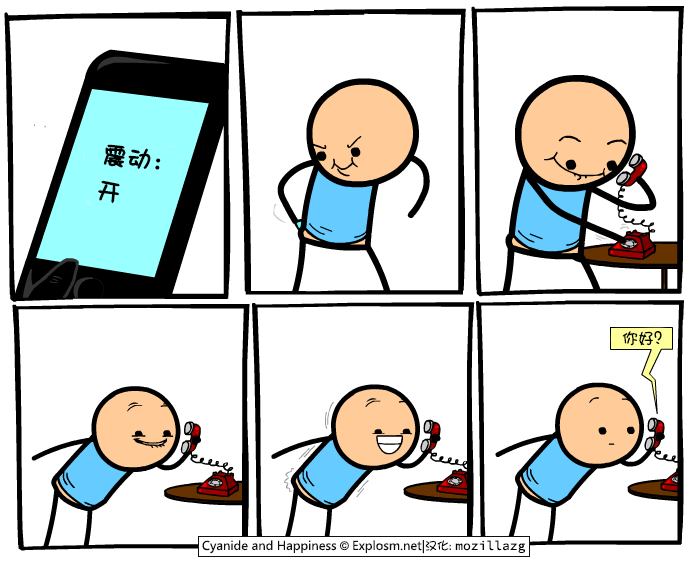
<style>
.page{position:relative;width:690px;height:570px;background:#ffffff}
.page>*{position:absolute;margin:0}
.t1{font:24px "DFShaoNvW5";color:#000000;font-weight:bold}
.t2{font:16px "DFShaoNvW5";color:#000000}
</style>
<div class="page">
<p class="t1" style="left:103px;top:144px;width:58px;height:26px;rotate:7deg">震动：</p>
<p class="t1" style="left:98px;top:180px;width:22px;height:24px;rotate:9deg">开</p>
<p class="t2" style="left:622px;top:331px;width:40px;height:15px">你好？</p>
</div>
